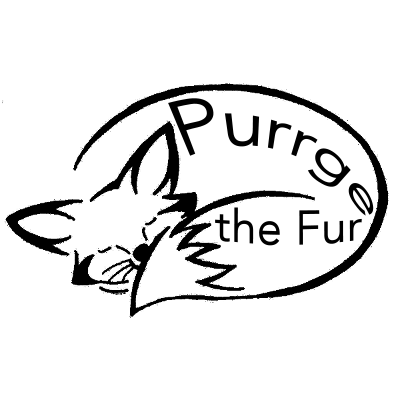
<style>
.page{position:relative;width:400px;height:400px;background:#ffffff}
.page>*{position:absolute;margin:0}
.t1{font:54.2px "Avenir-Roman";color:#000000}
.t2{font:42.5px "Avenir-Roman";color:#000000;scale:1.09 1}
</style>
<div class="page">
<p class="t1" style="left:168px;top:98px;width:206px;height:118px;rotate:22deg">Purrge</p>
<p class="t2" style="left:215px;top:207px;width:147px;height:39px">the Fur</p>
</div>
